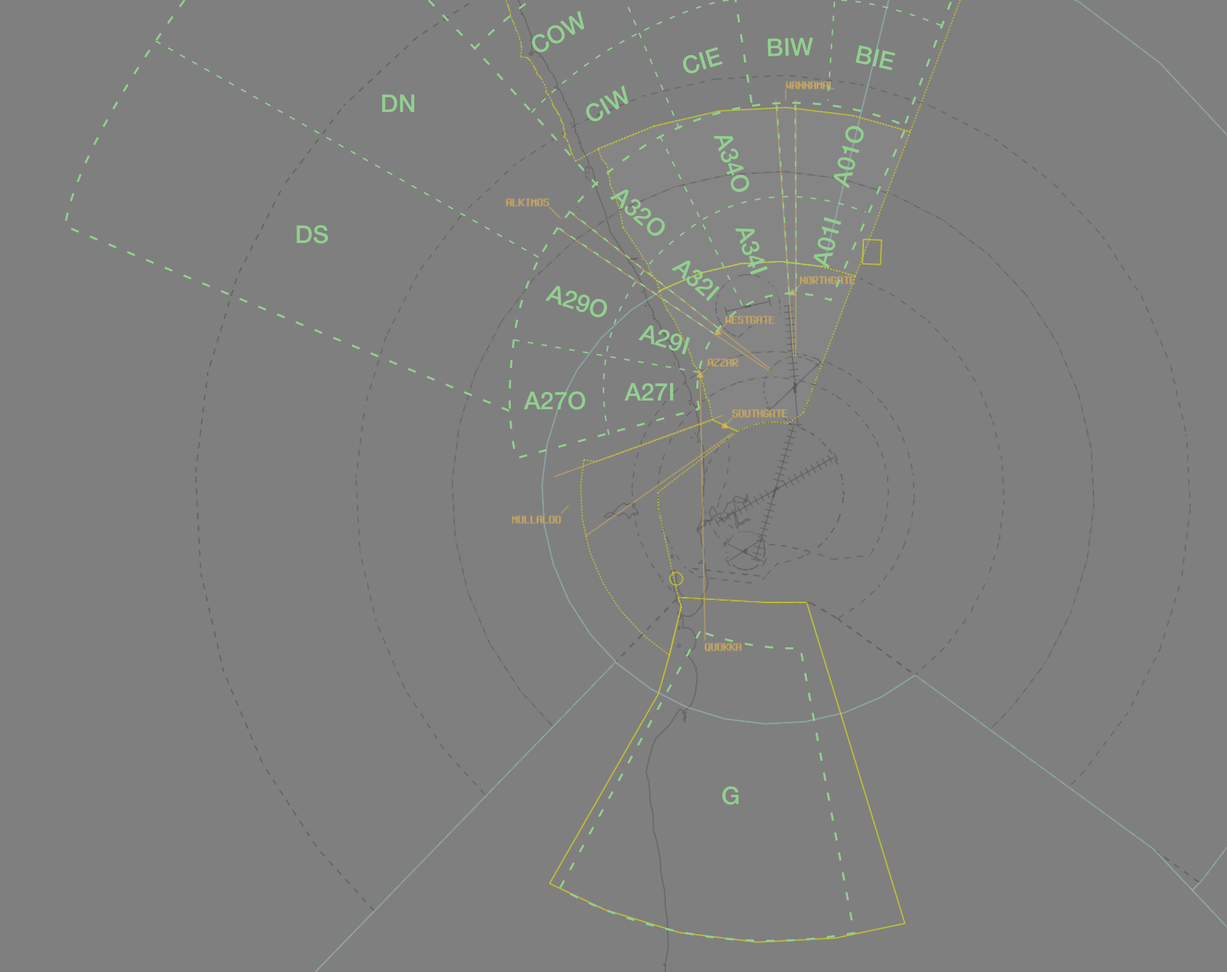
<style>
.page{position:relative;width:1227px;height:972px;background:#7f7f7f}
.page>*{position:absolute;margin:0}
.t1{font:24.5px "HelveticaNeue-Medium";color:#92cf8f}
</style>
<div class="page">
<p class="t1" style="left:532px;top:11px;width:52px;height:41px;rotate:-30deg">COW</p>
<p class="t1" style="left:768px;top:37px;width:46px;height:19px;rotate:-2deg">BIW</p>
<p class="t1" style="left:683px;top:47px;width:40px;height:27px;rotate:-17deg">CIE</p>
<p class="t1" style="left:856px;top:45px;width:39px;height:26px;rotate:13deg">BIE</p>
<p class="t1" style="left:586px;top:85px;width:42px;height:36px;rotate:-30deg">CIW</p>
<p class="t1" style="left:382px;top:94px;width:33px;height:18px">DN</p>
<p class="t1" style="left:834px;top:126px;width:30px;height:63px;rotate:-74deg">A01O</p>
<p class="t1" style="left:713px;top:136px;width:37px;height:56px;rotate:70deg">A34O</p>
<p class="t1" style="left:610px;top:189px;width:55px;height:47px;rotate:41deg">A32O</p>
<p class="t1" style="left:814px;top:217px;width:28px;height:52px;rotate:-74deg">A01I</p>
<p class="t1" style="left:297px;top:225px;width:31px;height:18px">DS</p>
<p class="t1" style="left:735px;top:228px;width:33px;height:47px;rotate:70deg">A34I</p>
<p class="t1" style="left:671px;top:260px;width:49px;height:41px;rotate:41deg">A32I</p>
<p class="t1" style="left:545px;top:285px;width:63px;height:33px;rotate:18deg">A29O</p>
<p class="t1" style="left:638px;top:325px;width:52px;height:29px;rotate:18deg">A29I</p>
<p class="t1" style="left:624px;top:383px;width:49px;height:17px">A27I</p>
<p class="t1" style="left:524px;top:391px;width:62px;height:19px">A27O</p>
<p class="t1" style="left:723px;top:786px;width:16px;height:18px">G</p>
</div>
